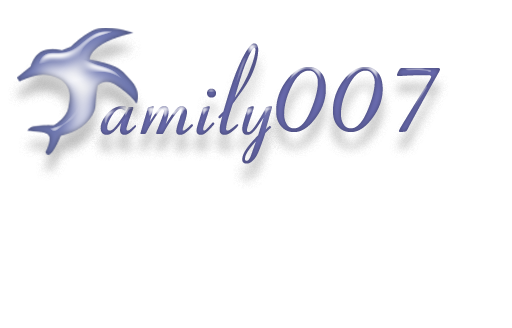
<style>
.page{position:relative;width:512px;height:328px;background:#ffffff}
.page>*{position:absolute;margin:0}
.t1{font:120px "CoronetW1Italic";color:#5e609d}
.t2{font:140px "CoronetW1Italic";color:#5f619f}
</style>
<div class="page">
<p class="t1" style="left:100px;top:43px;width:172px;height:121px">amily</p>
<p class="t2" style="left:276px;top:67px;width:164px;height:65px">007</p>
</div>
